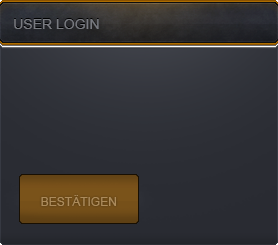
<style>
.page{position:relative;width:278px;height:245px}
.page>*{position:absolute;margin:0}
.t1{font:14px "ArialMT";color:#787a80}
.t2{font:12px "ArialMT";color:#ac8b5b}
</style>
<div class="page">
<p class="t1" style="left:14px;top:19px;width:85px;height:10px">USER LOGIN</p>
<p class="t2" style="left:41px;top:195px;width:75px;height:11px">BESTÄTIGEN</p>
</div>
